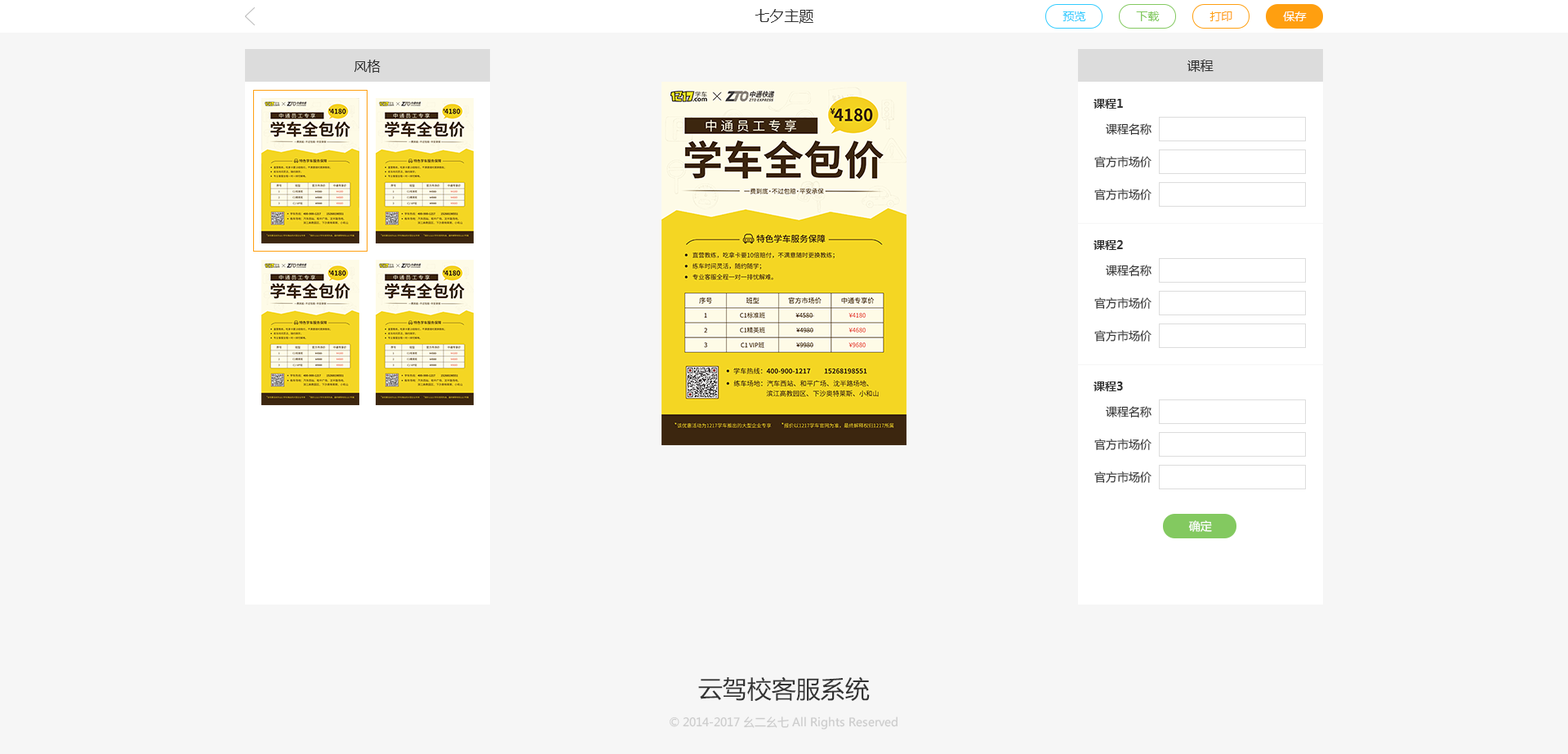
<style>
.page{position:relative;width:1568px;height:754px;background:#f6f6f6}
.page>*{position:absolute;margin:0}
.t1{font:14.7px "MicrosoftYaHei";color:#333333}
.t2{font:11.4px "MicrosoftYaHei";color:#33ccff}
.t3{font:11.4px "MicrosoftYaHei";color:#83c960}
.t4{font:11.4px "MicrosoftYaHei";color:#ff9f10}
.t5{font:11.4px "MicrosoftYaHei";color:#ffffff}
.t6{font:13.1px "MicrosoftYaHei";color:#333333}
.t7{font:11.4px "MicrosoftYaHei-Bold";color:#333333}
.t8{font:11.4px "MicrosoftYaHei";color:#333333}
.t9{font:24.6px "MicrosoftYaHei";color:#333333}
.t10{font:11.5px "MicrosoftYaHei";color:#cccccc}
</style>
<div class="page">
<p class="t1" style="left:755px;top:9px;width:58px;height:15px">七夕主题</p>
<p class="t2" style="left:1062px;top:11px;width:24px;height:10px">预览</p>
<p class="t3" style="left:1136px;top:11px;width:24px;height:10px">下载</p>
<p class="t4" style="left:1209px;top:11px;width:23px;height:10px">打印</p>
<p class="t5" style="left:1283px;top:11px;width:24px;height:10px">保存</p>
<p class="t6" style="left:354px;top:60px;width:27px;height:13px">风格</p>
<p class="t6" style="left:1187px;top:60px;width:27px;height:12px">课程</p>
<p class="t7" style="left:1094px;top:99px;width:29px;height:10px">课程1</p>
<p class="t8" style="left:1106px;top:123px;width:46px;height:13px">课程名称</p>
<p class="t8" style="left:1094px;top:156px;width:58px;height:11px">官方市场价</p>
<p class="t8" style="left:1094px;top:189px;width:58px;height:11px">官方市场价</p>
<p class="t7" style="left:1094px;top:240px;width:29px;height:10px">课程2</p>
<p class="t8" style="left:1106px;top:265px;width:46px;height:12px">课程名称</p>
<p class="t8" style="left:1094px;top:297px;width:58px;height:12px">官方市场价</p>
<p class="t8" style="left:1094px;top:330px;width:58px;height:11px">官方市场价</p>
<p class="t7" style="left:1094px;top:381px;width:29px;height:10px">课程3</p>
<p class="t8" style="left:1106px;top:406px;width:46px;height:12px">课程名称</p>
<p class="t8" style="left:1094px;top:439px;width:58px;height:11px">官方市场价</p>
<p class="t8" style="left:1094px;top:471px;width:58px;height:12px">官方市场价</p>
<p class="t5" style="left:1188px;top:520px;width:24px;height:12px">确定</p>
<p class="t9" style="left:698px;top:676px;width:172px;height:25px">云驾校客服系统</p>
<p class="t10" style="left:670px;top:716px;width:228px;height:13px">© 2014-2017 幺二幺七 All Rights Reserved</p>
</div>
